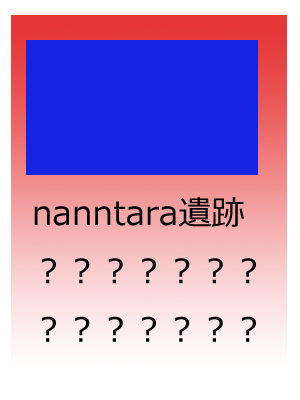
<style>
.page{position:relative;width:300px;height:400px;background:#1524e2}
.page>*{position:absolute;margin:0}
.t1{font:33.3px "Meiryo";color:#000000}
</style>
<div class="page">
<p class="t1" style="left:34px;top:197px;width:222px;height:145px">nanntara遺跡<br>？？？？？？？<br>？？？？？？？</p>
</div>
